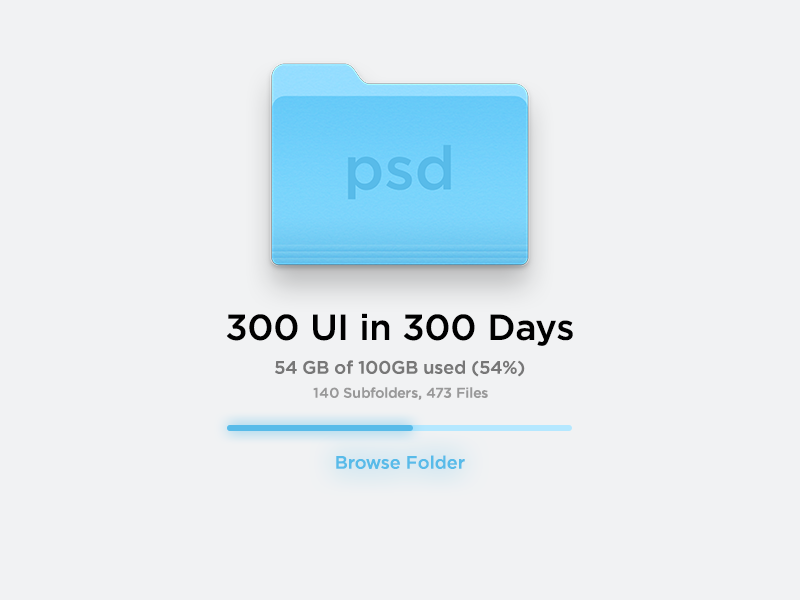
<style>
.page{position:relative;width:800px;height:600px;background:#f1f2f3}
.page>*{position:absolute;margin:0}
.t1{font:36px "GothamHTF-Medium";color:#000000}
.t2{font:18px "GothamHTF-Medium";color:#777777}
.t3{font:14px "GothamHTF-Medium";color:#999999}
.t4{font:18px "GothamHTF-Medium";color:#58bbe9}
</style>
<div class="page">
<p class="t1" style="left:226px;top:313px;width:347px;height:33px">300 UI in 300 Days</p>
<p class="t2" style="left:275px;top:360px;width:250px;height:17px">54 GB of 100GB used (54%)</p>
<p class="t3" style="left:313px;top:387px;width:175px;height:13px">140 Subfolders, 473 Files</p>
<p class="t4" style="left:336px;top:455px;width:129px;height:14px">Browse Folder</p>
</div>
